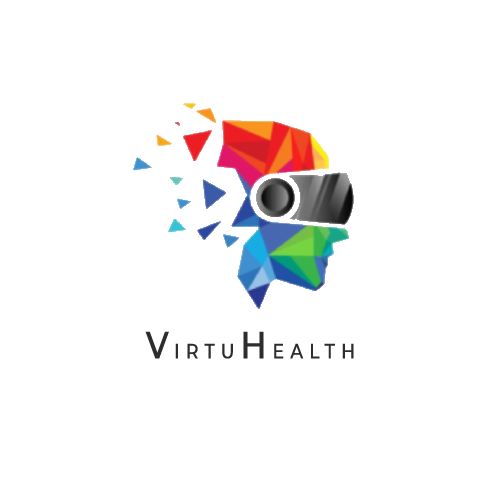
<style>
.page{position:relative;width:500px;height:500px;background:#ffffff}
.page>*{position:absolute;margin:0}
.t1{font:38px "Montserrat-Medium";letter-spacing:0.138em;color:#2d2d2d;font-variant:small-caps;font-weight:bold;scale:0.83 1}
</style>
<div class="page">
<p class="t1" style="left:145px;top:331px;width:209px;height:28px">VirtuHealth</p>
</div>
